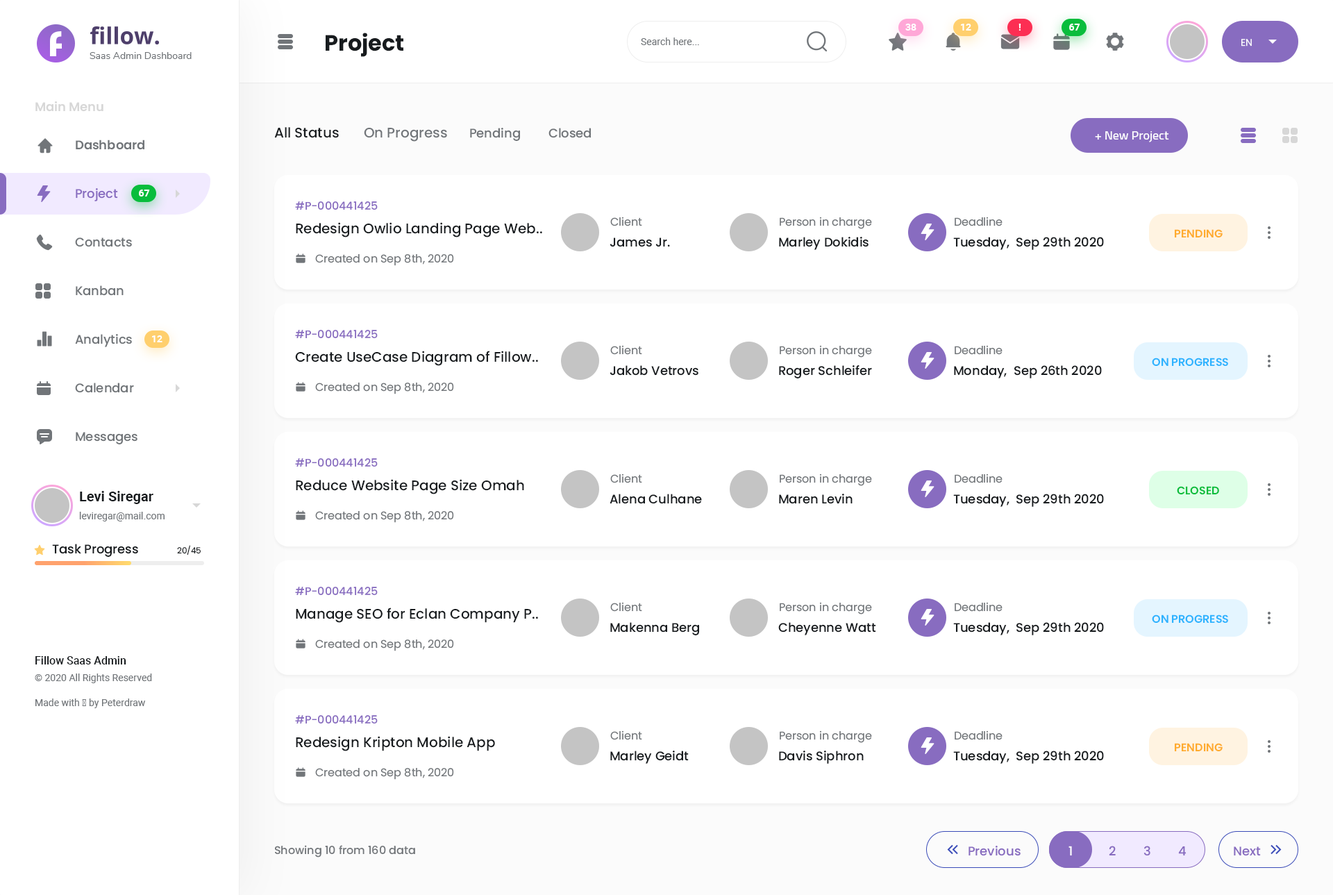
<style>
.page{position:relative;width:1333px;height:895px;background:#ffffff}
.page>*{position:absolute;margin:0}
.t1{font:9.7px "Roboto-Bold";color:#ffffff}
.t2{font:22.2px "Poppins-Bold";color:#171b1e}
.t3{font:9.7px "Roboto-Regular";color:#717579}
.t4{font:9.7px "Poppins-Regular";color:#ffffff}
.t5{font:9.7px "Nunito-Regular";color:#717579}
.t6{font:12.5px "Poppins-SemiBold";color:#d7d7d7}
.t7{font:13.9px "Poppins-Medium";color:#171b1e}
.t8{font:13.9px "Poppins-Medium";color:#717579}
.t9{font:12.5px "Poppins-Medium";color:#717579}
.t10{font:12.5px "Cairo-SemiBold";color:#ffffff}
.t11{font:12.5px "Poppins-SemiBold";color:#717579}
.t12{font:12.5px "Poppins-Medium";color:#886cc0}
.t13{font:11.1px "Poppins-Medium";color:#886cc0}
.t14{font:11.1px "Poppins-Regular";color:#717579}
.t15{font:11.1px "Poppins-SemiBold";color:#ffab2d}
.t16{font:12.5px "Poppins-Medium";color:#171b1e}
.t17{font:11.1px "Poppins-SemiBold";color:#2db3ff}
.t18{font:11.1px "Poppins-SemiBold";color:#09bd3c}
.t19{font:13.9px "Roboto-Bold";color:#171b1e}
.t20{font:8.3px "Poppins-Regular";color:#171b1e}
.t21{font:11.1px "Roboto-Medium";color:#171b1e}
.t22{font:11.1px "Poppins-Medium";color:#717579}
.t23{font:12.5px "Poppins-Medium";color:#ffffff}
</style>
<div class="page">
<p class="t1" style="left:905px;top:24px;width:11px;height:7px">38</p>
<p class="t1" style="left:961px;top:24px;width:10px;height:7px">12</p>
<p class="t1" style="left:1018px;top:24px;width:3px;height:7px">!</p>
<p class="t1" style="left:1069px;top:24px;width:11px;height:7px">67</p>
<p class="t2" style="left:326px;top:33px;width:77px;height:24px">Project</p>
<p class="t3" style="left:641px;top:37px;width:58px;height:8px">Search here...</p>
<p class="t4" style="left:1241px;top:39px;width:11px;height:8px">EN</p>
<p class="t5" style="left:90px;top:52px;width:102px;height:7px">Saas Admin Dashboard</p>
<p class="t6" style="left:35px;top:101px;width:68px;height:11px">Main Menu</p>
<p class="t7" style="left:274px;top:127px;width:65px;height:11px">All Status</p>
<p class="t8" style="left:364px;top:128px;width:83px;height:14px">On Progress</p>
<p class="t9" style="left:470px;top:128px;width:50px;height:13px">Pending</p>
<p class="t9" style="left:548px;top:128px;width:43px;height:10px">Closed</p>
<p class="t10" style="left:1095px;top:131px;width:74px;height:11px">+ New Project</p>
<p class="t11" style="left:76px;top:140px;width:68px;height:10px">Dashboard</p>
<p class="t12" style="left:76px;top:188px;width:42px;height:13px">Project</p>
<p class="t1" style="left:139px;top:189px;width:11px;height:7px">67</p>
<p class="t13" style="left:295px;top:201px;width:83px;height:9px">#P-000441425</p>
<p class="t14" style="left:610px;top:217px;width:32px;height:9px">Client</p>
<p class="t14" style="left:780px;top:217px;width:92px;height:12px">Person in charge</p>
<p class="t14" style="left:954px;top:217px;width:48px;height:9px">Deadline</p>
<p class="t7" style="left:296px;top:222px;width:246px;height:15px">Redesign Owlio Landing Page Web..</p>
<p class="t15" style="left:1174px;top:229px;width:48px;height:8px">PENDING</p>
<p class="t9" style="left:75px;top:237px;width:57px;height:10px">Contacts</p>
<p class="t16" style="left:609px;top:237px;width:61px;height:10px">James Jr.</p>
<p class="t16" style="left:779px;top:237px;width:89px;height:13px">Marley Dokidis</p>
<p class="t16" style="left:953px;top:237px;width:151px;height:13px">Tuesday,  Sep 29th 2020</p>
<p class="t14" style="left:315px;top:254px;width:139px;height:12px">Created on Sep 8th, 2020</p>
<p class="t9" style="left:76px;top:285px;width:48px;height:11px">Kanban</p>
<p class="t13" style="left:295px;top:330px;width:83px;height:8px">#P-000441425</p>
<p class="t9" style="left:75px;top:334px;width:57px;height:13px">Analytics</p>
<p class="t1" style="left:152px;top:335px;width:10px;height:7px">12</p>
<p class="t7" style="left:295px;top:351px;width:243px;height:15px">Create UseCase Diagram of Fillow..</p>
<p class="t14" style="left:610px;top:345px;width:32px;height:10px">Client</p>
<p class="t14" style="left:780px;top:345px;width:92px;height:12px">Person in charge</p>
<p class="t14" style="left:954px;top:345px;width:48px;height:10px">Deadline</p>
<p class="t16" style="left:609px;top:365px;width:89px;height:11px">Jakob Vetrovs</p>
<p class="t16" style="left:779px;top:365px;width:93px;height:13px">Roger Schleifer</p>
<p class="t16" style="left:954px;top:365px;width:148px;height:13px">Monday,  Sep 26th 2020</p>
<p class="t17" style="left:1152px;top:357px;width:76px;height:9px">ON PROGRESS</p>
<p class="t9" style="left:75px;top:382px;width:59px;height:11px">Calendar</p>
<p class="t14" style="left:315px;top:382px;width:139px;height:12px">Created on Sep 8th, 2020</p>
<p class="t9" style="left:76px;top:432px;width:61px;height:12px">Messages</p>
<p class="t13" style="left:295px;top:458px;width:83px;height:8px">#P-000441425</p>
<p class="t14" style="left:610px;top:473px;width:32px;height:10px">Client</p>
<p class="t14" style="left:780px;top:473px;width:92px;height:13px">Person in charge</p>
<p class="t14" style="left:954px;top:473px;width:48px;height:10px">Deadline</p>
<p class="t7" style="left:296px;top:479px;width:228px;height:15px">Reduce Website Page Size Omah</p>
<p class="t18" style="left:1177px;top:486px;width:42px;height:8px">CLOSED</p>
<p class="t19" style="left:80px;top:491px;width:73px;height:13px">Levi Siregar</p>
<p class="t16" style="left:609px;top:494px;width:93px;height:10px">Alena Culhane</p>
<p class="t16" style="left:779px;top:494px;width:73px;height:10px">Maren Levin</p>
<p class="t16" style="left:953px;top:494px;width:151px;height:13px">Tuesday,  Sep 29th 2020</p>
<p class="t3" style="left:79px;top:512px;width:86px;height:9px">leviregar@mail.com</p>
<p class="t14" style="left:315px;top:511px;width:139px;height:12px">Created on Sep 8th, 2020</p>
<p class="t16" style="left:52px;top:544px;width:86px;height:13px">Task Progress</p>
<p class="t20" style="left:177px;top:545px;width:24px;height:10px">20/45</p>
<p class="t13" style="left:295px;top:587px;width:83px;height:8px">#P-000441425</p>
<p class="t14" style="left:610px;top:602px;width:32px;height:10px">Client</p>
<p class="t14" style="left:780px;top:602px;width:92px;height:12px">Person in charge</p>
<p class="t14" style="left:954px;top:602px;width:48px;height:10px">Deadline</p>
<p class="t7" style="left:296px;top:607px;width:242px;height:16px">Manage SEO for Eclan Company P..</p>
<p class="t17" style="left:1152px;top:614px;width:76px;height:9px">ON PROGRESS</p>
<p class="t16" style="left:610px;top:622px;width:89px;height:13px">Makenna Berg</p>
<p class="t16" style="left:778px;top:622px;width:98px;height:13px">Cheyenne Watt</p>
<p class="t16" style="left:953px;top:622px;width:151px;height:13px">Tuesday,  Sep 29th 2020</p>
<p class="t14" style="left:315px;top:639px;width:139px;height:12px">Created on Sep 8th, 2020</p>
<p class="t21" style="left:35px;top:656px;width:91px;height:8px">Fillow Saas Admin</p>
<p class="t3" style="left:35px;top:673px;width:117px;height:10px">© 2020 All Rights Reserved</p>
<p class="t3" style="left:35px;top:698px;width:111px;height:10px">Made with ♥ by Peterdraw</p>
<p class="t13" style="left:295px;top:715px;width:83px;height:8px">#P-000441425</p>
<p class="t7" style="left:296px;top:736px;width:199px;height:15px">Redesign Kripton Mobile App</p>
<p class="t14" style="left:610px;top:730px;width:32px;height:10px">Client</p>
<p class="t14" style="left:780px;top:730px;width:92px;height:13px">Person in charge</p>
<p class="t14" style="left:954px;top:730px;width:48px;height:10px">Deadline</p>
<p class="t15" style="left:1174px;top:743px;width:48px;height:8px">PENDING</p>
<p class="t16" style="left:610px;top:750px;width:79px;height:14px">Marley Geidt</p>
<p class="t16" style="left:779px;top:750px;width:84px;height:14px">Davis Siphron</p>
<p class="t16" style="left:953px;top:750px;width:151px;height:14px">Tuesday,  Sep 29th 2020</p>
<p class="t14" style="left:315px;top:768px;width:139px;height:12px">Created on Sep 8th, 2020</p>
<p class="t22" style="left:275px;top:845px;width:140px;height:12px">Showing 10 from 160 data</p>
<p class="t12" style="left:968px;top:845px;width:52px;height:11px">Previous</p>
<p class="t23" style="left:1068px;top:845px;width:4px;height:11px">1</p>
<p class="t12" style="left:1109px;top:845px;width:6px;height:10px">2</p>
<p class="t12" style="left:1143px;top:845px;width:7px;height:11px">3</p>
<p class="t12" style="left:1178px;top:845px;width:8px;height:11px">4</p>
<p class="t12" style="left:1233px;top:846px;width:28px;height:10px">Next</p>
</div>
